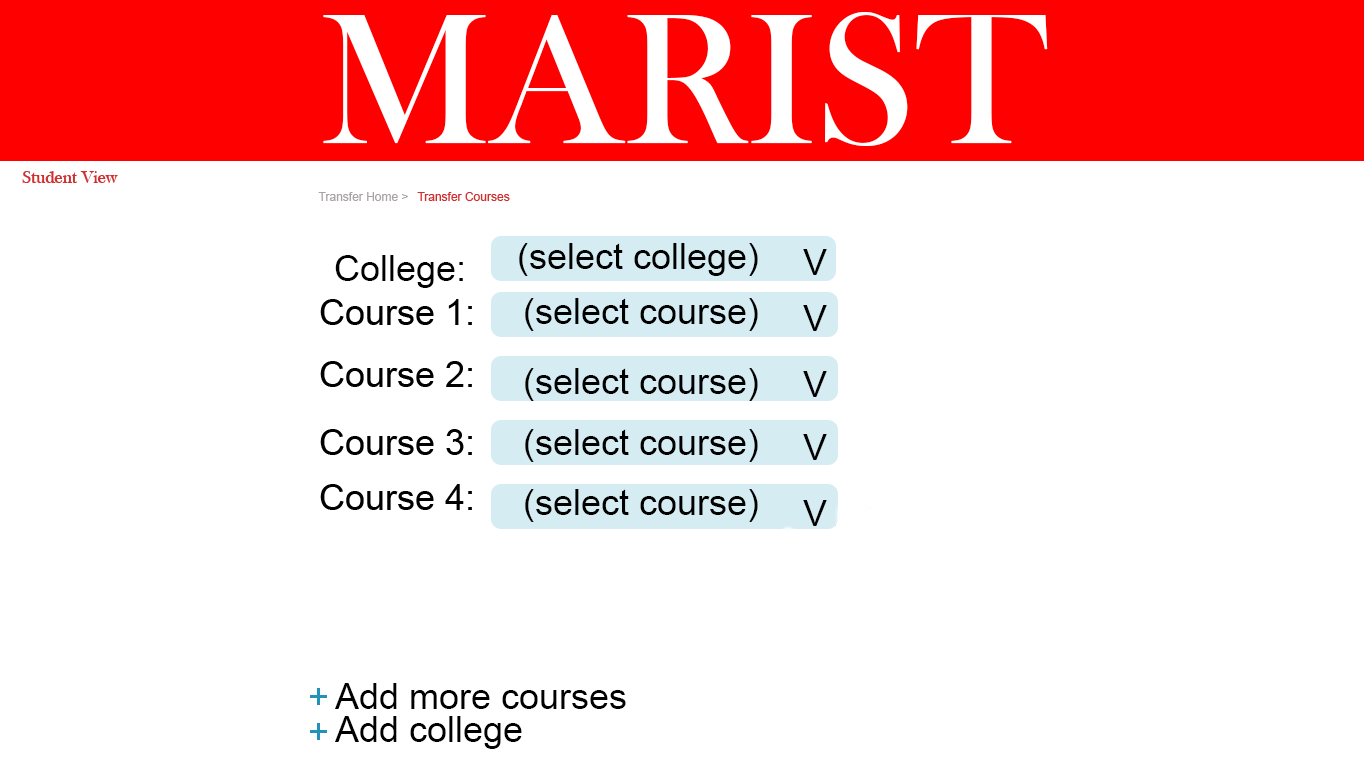
<style>
.page{position:relative;width:1366px;height:768px;background:#ffffff}
.page>*{position:absolute;margin:0}
.t1{font:36px "ArialMT";color:#000000}
.t2{font:36px "ArialMT";color:#2292b8}
</style>
<div class="page">
<p class="t1" style="left:519px;top:243px;width:239px;height:33px">(select college)</p>
<p class="t1" style="left:335px;top:255px;width:128px;height:33px">College:</p>
<p class="t1" style="left:803px;top:249px;width:24px;height:26px">V</p>
<p class="t1" style="left:525px;top:298px;width:233px;height:33px">(select course)</p>
<p class="t1" style="left:803px;top:305px;width:24px;height:26px">V</p>
<p class="t1" style="left:525px;top:368px;width:233px;height:33px">(select course)</p>
<p class="t1" style="left:803px;top:371px;width:24px;height:26px">V</p>
<p class="t1" style="left:525px;top:429px;width:233px;height:33px">(select course)</p>
<p class="t1" style="left:803px;top:434px;width:24px;height:26px">V</p>
<p class="t1" style="left:525px;top:489px;width:233px;height:33px">(select course)</p>
<p class="t1" style="left:803px;top:500px;width:24px;height:26px">V</p>
<p class="t2" style="left:310px;top:688px;width:17px;height:17px">+</p>
<p class="t1" style="left:335px;top:683px;width:291px;height:26px">Add more courses</p>
<p class="t2" style="left:310px;top:723px;width:17px;height:17px">+</p>
<p class="t1" style="left:335px;top:716px;width:187px;height:33px">Add college</p>
</div>
